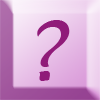
<style>
.page{position:relative;width:100px;height:100px}
.page>*{position:absolute;margin:0}
.t1{font:83.3px "LucidaHandwriting-Italic";color:#901b79}
</style>
<div class="page">
<p class="t1" style="left:37px;top:20px;width:33px;height:61px">?</p>
</div>
